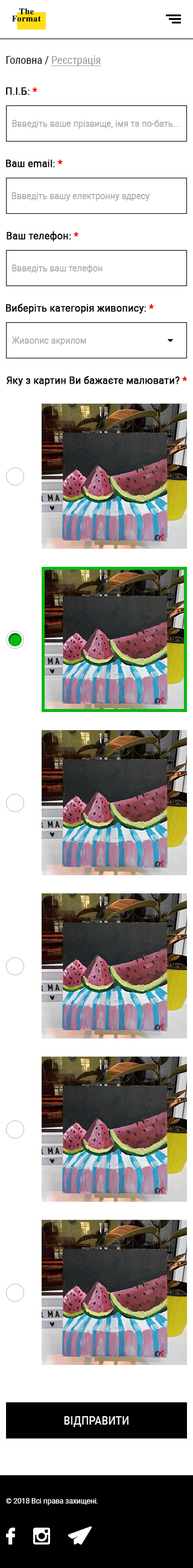
<style>
.page{position:relative;width:193px;height:1568px;background:#ffffff}
.page>*{position:absolute;margin:0}
.t1{font:10.8px "RobotoCondensed-Regular";color:#979595;text-decoration:underline}
.t2{font:10.8px "RobotoCondensed-Regular";color:#000000}
.t3{font:9.7px "Roboto-Regular";color:#000000;font-weight:bold}
.t4{font:9.7px "Roboto-Bold";color:#ff0000;font-weight:bold}
.t5{font:8.4px "Roboto-Light";color:#aaaaaa;font-weight:bold}
.t6{font:12px "RobotoCondensed-Regular";color:#ffffff;text-transform:uppercase}
.t7{font:7.2px "Roboto-Regular";color:#ffffff}
.t8{font:7.2px "TimesNewRomanPSMT";color:#ffffff}
</style>
<div class="page">
<p class="t1" style="left:6px;top:55px;width:95px;height:11px"><span class="t2">Головна / </span>Реєстрація</p>
<p class="t3" style="left:6px;top:87px;width:31px;height:8px">П.І.Б: <span class="t4">*</span></p>
<p class="t5" style="left:12px;top:119px;width:167px;height:10px">Ввведіть ваше прізвище, імя та по-бать...</p>
<p class="t3" style="left:6px;top:160px;width:57px;height:7px">Ваш email: <span class="t4">*</span></p>
<p class="t5" style="left:11px;top:192px;width:138px;height:9px">Ввведіть вашу електронну адресу</p>
<p class="t3" style="left:7px;top:231px;width:71px;height:11px">Ваш телефон: <span class="t4">*</span></p>
<p class="t5" style="left:12px;top:264px;width:90px;height:9px">Ввведіть ваш телефон</p>
<p class="t3" style="left:6px;top:304px;width:148px;height:10px">Виберіть категорія живопису: <span class="t4">*</span></p>
<p class="t5" style="left:11px;top:337px;width:75px;height:9px">Живопис акрилом</p>
<p class="t3" style="left:7px;top:376px;width:180px;height:10px">Яку з картин Ви бажаєте малювати? <span class="t4">*</span></p>
<p class="t6" style="left:64px;top:1416px;width:64px;height:11px">Відправити</p>
<p class="t7" style="left:6px;top:1498px;width:92px;height:7px"><span class="t8">©</span> 2018 Всі права захищені.</p>
</div>
